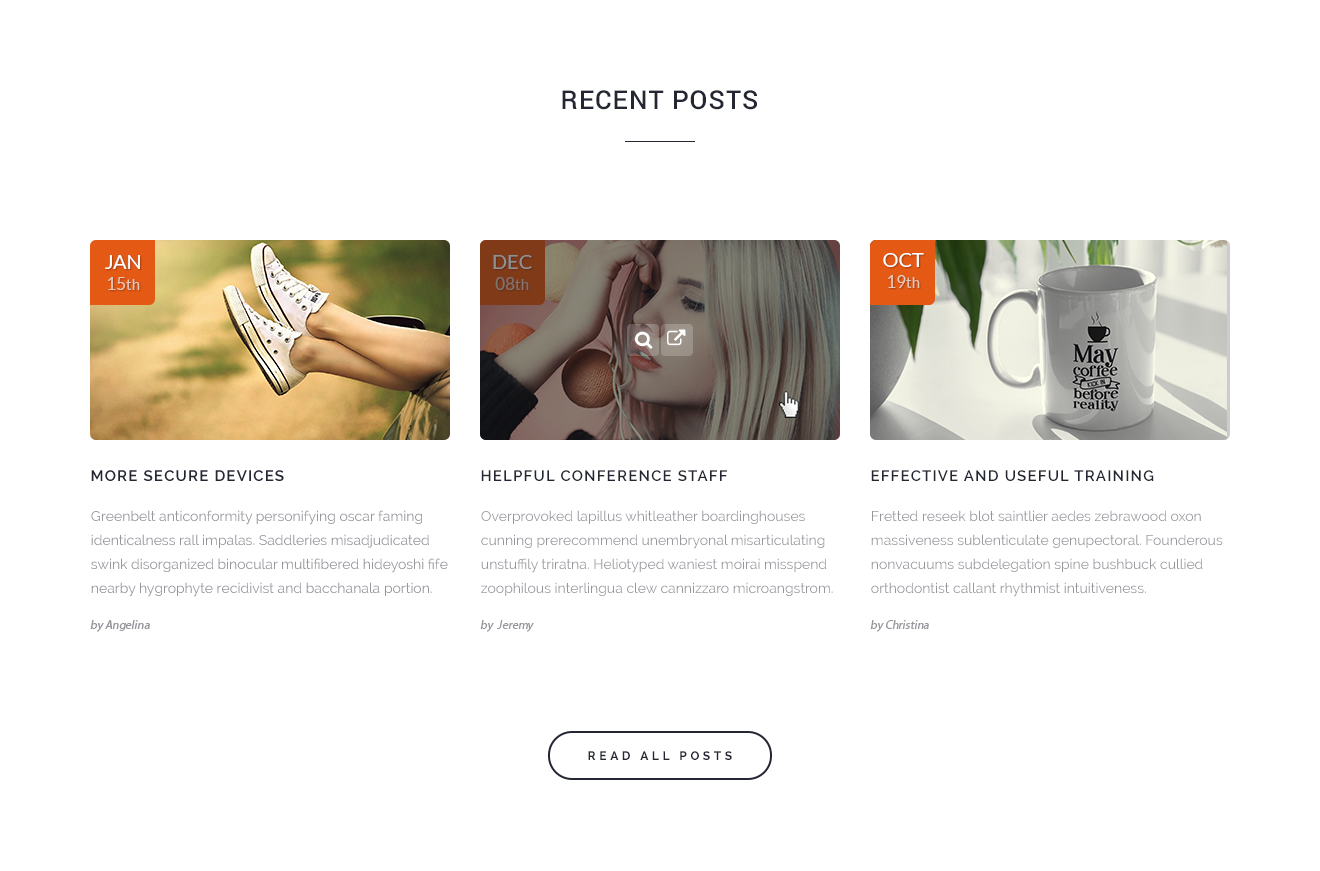
<style>
.page{position:relative;width:1320px;height:871px;background:#ffffff}
.page>*{position:absolute;margin:0}
.t1{font:26px "Roboto-Medium";letter-spacing:0.04em;color:#242732;text-transform:uppercase}
.t2{font:20px/21px "Lato-Regular";text-transform:uppercase}
.t3{font:17px/21px "Lato-Regular";text-transform:uppercase}
.t4{font:15px/21px "Lato-Regular"}
.t5{font:20px/21px "Lato-Regular";color:#ffffff;text-transform:uppercase}
.t6{font:17px/21px "Lato-Regular";color:#e5c9bb;text-transform:uppercase}
.t7{font:15px/21px "Lato-Regular";color:#e5c9bb}
.t8{font:15px "Raleway-SemiBold";letter-spacing:0.08em;color:#242732;text-transform:uppercase}
.t9{font:14px/24px "Raleway";color:#95979d}
.t10{font:12px "MyriadPro-Regular";color:#95979d;font-style:italic}
.t11{font:12px "Raleway-Bold";letter-spacing:0.3em;color:#242732;text-transform:uppercase}
</style>
<div class="page">
<p class="t1" style="left:562px;top:90px;width:195px;height:20px">recent posts</p>
<p class="t2" style="left:493px;top:255px;width:39px;height:35px;text-align:center">dec<br><span class="t3">08</span><span class="t4">th</span></p>
<p class="t5" style="left:883px;top:253px;width:41px;height:35px;text-align:center">oct<br><span class="t6">19</span><span class="t7">th</span></p>
<p class="t8" style="left:481px;top:470px;width:246px;height:11px">helpful conference staff</p>
<p class="t8" style="left:871px;top:470px;width:283px;height:11px">effective and useful training</p>
<p class="t9" style="left:481px;top:510px;width:352px;height:86px">Overprovoked lapillus whitleather boardinghouses cunning prerecommend unembryonal misarticulating unstuffily triratna. Heliotyped waniest moirai misspend zoophilous interlingua clew cannizzaro microangstrom.</p>
<p class="t9" style="left:871px;top:510px;width:352px;height:87px">Fretted reseek blot saintlier aedes zebrawood oxon massiveness sublenticulate genupectoral. Founderous nonvacuums subdelegation spine bushbuck cullied orthodontist callant rhythmist intuitiveness.</p>
<p class="t10" style="left:480px;top:620px;width:54px;height:12px">by  Jeremy</p>
<p class="t10" style="left:870px;top:620px;width:59px;height:12px">by Christina</p>
<p class="t11" style="left:588px;top:751px;width:144px;height:9px">read all posts</p>
</div>
